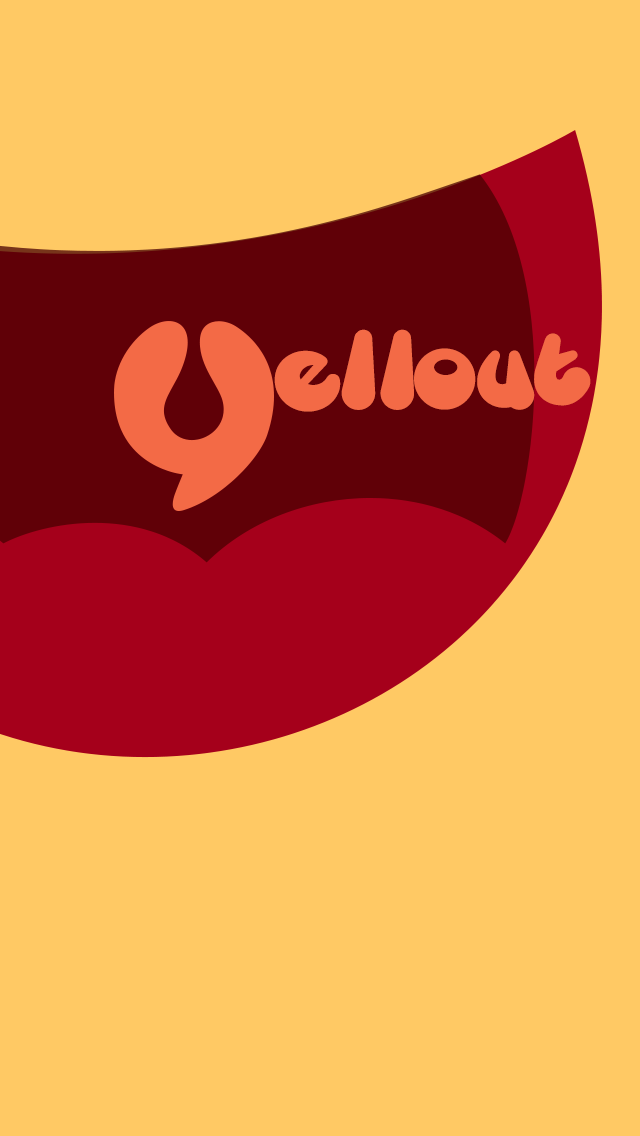
<style>
.page{position:relative;width:640px;height:1136px;background:#ffc964}
.page>*{position:absolute;margin:0}
.t1{font:131.6px "Gretoon";letter-spacing:-0.04em;color:#f36a46}
</style>
<div class="page">
<p class="t1" style="left:274px;top:329px;width:317px;height:83px">ellout</p>
</div>
